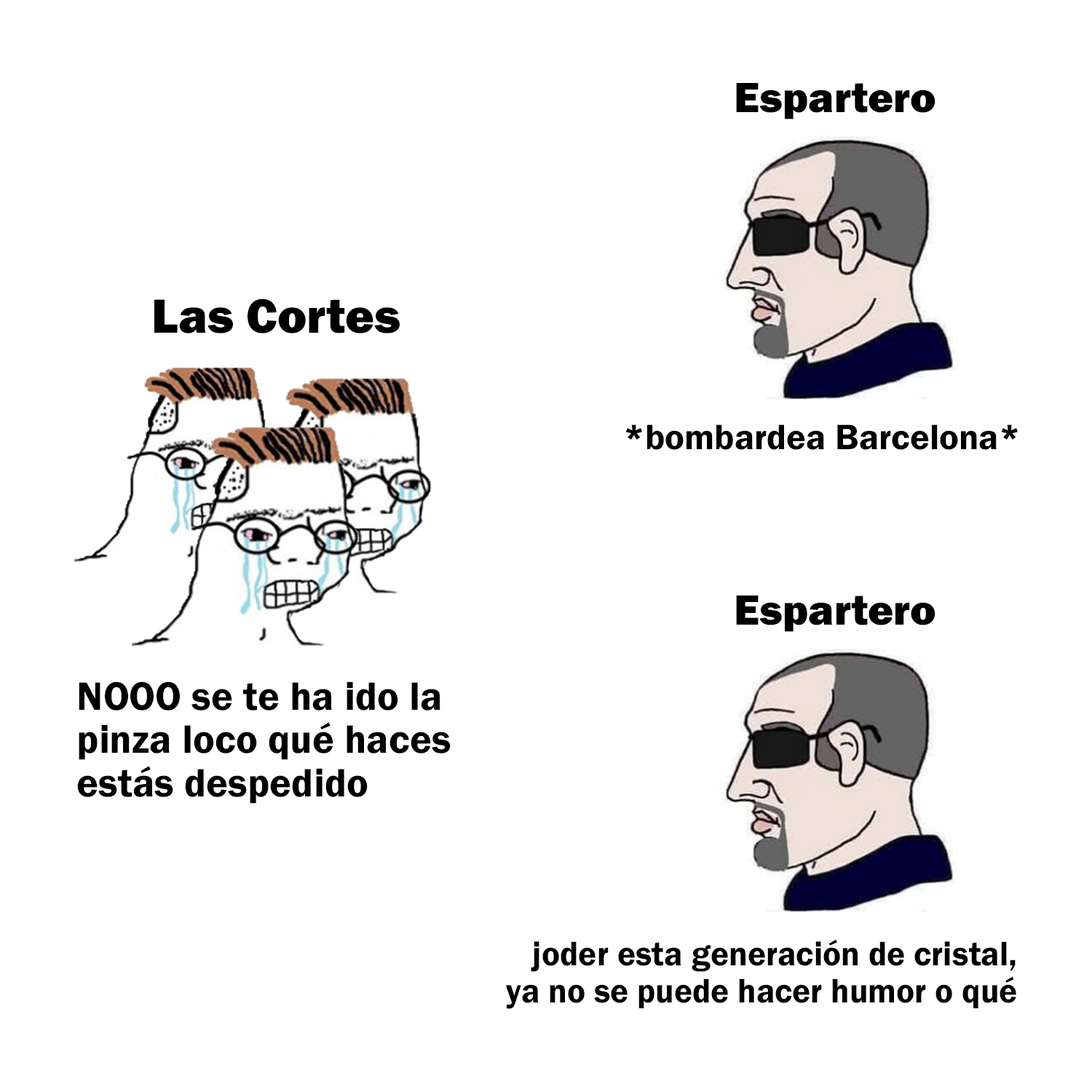
<style>
.page{position:relative;width:1092px;height:1092px;background:#ffffff}
.page>*{position:absolute;margin:0}
.t1{font:43.7px "FranklinGothic-Heavy";color:#000000}
.t2{font:49.7px "FranklinGothic-Heavy";color:#000000}
.t3{font:36.5px "FranklinGothic-Demi";color:#000000}
.t4{font:40.9px "FranklinGothic-Demi";color:#000000}
.t5{font:35.2px "FranklinGothic-Demi";color:#000000}
</style>
<div class="page">
<p class="t1" style="left:736px;top:83px;width:199px;height:36px">Espartero</p>
<p class="t2" style="left:154px;top:298px;width:246px;height:35px">Las Cortes</p>
<p class="t3" style="left:625px;top:424px;width:393px;height:26px">*bombardea Barcelona*</p>
<p class="t1" style="left:736px;top:595px;width:199px;height:37px">Espartero</p>
<p class="t4" style="left:77px;top:681px;width:374px;height:123px">NOOO se te ha ido la<br>pinza loco qué haces<br>estás despedido</p>
<p class="t5" style="left:505px;top:939px;width:511px;height:70px;text-align:right">joder esta generación de cristal,<br>ya no se puede hacer humor o qué</p>
</div>
